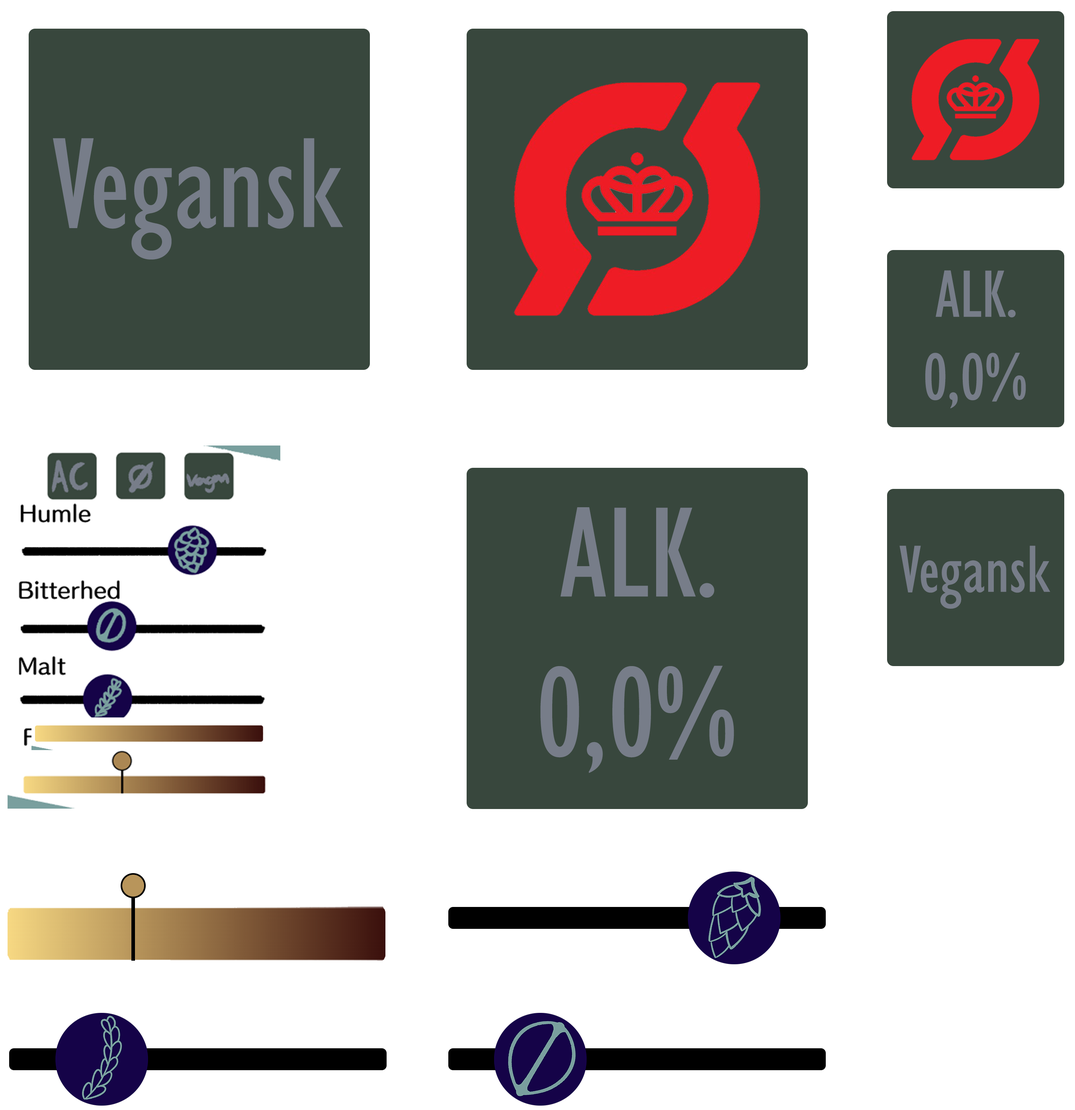
<style>
.page{position:relative;width:1075px;height:1110px;background:#ffffff}
.page>*{position:absolute;margin:0}
.t1{font:132.7px "GillSansMT-Condensed";color:#777d89}
.t2{font:68.9px "GillSansMT-Condensed";color:#777d89}
</style>
<div class="page">
<p class="t1" style="left:53px;top:138px;width:290px;height:121px">Vegansk</p>
<p class="t2" style="left:925px;top:270px;width:101px;height:138px;text-align:center">ALK.<br>0,0%</p>
<p class="t1" style="left:540px;top:507px;width:194px;height:266px;text-align:center">ALK.<br>0,0%</p>
<p class="t2" style="left:899px;top:545px;width:151px;height:64px">Vegansk</p>
</div>
